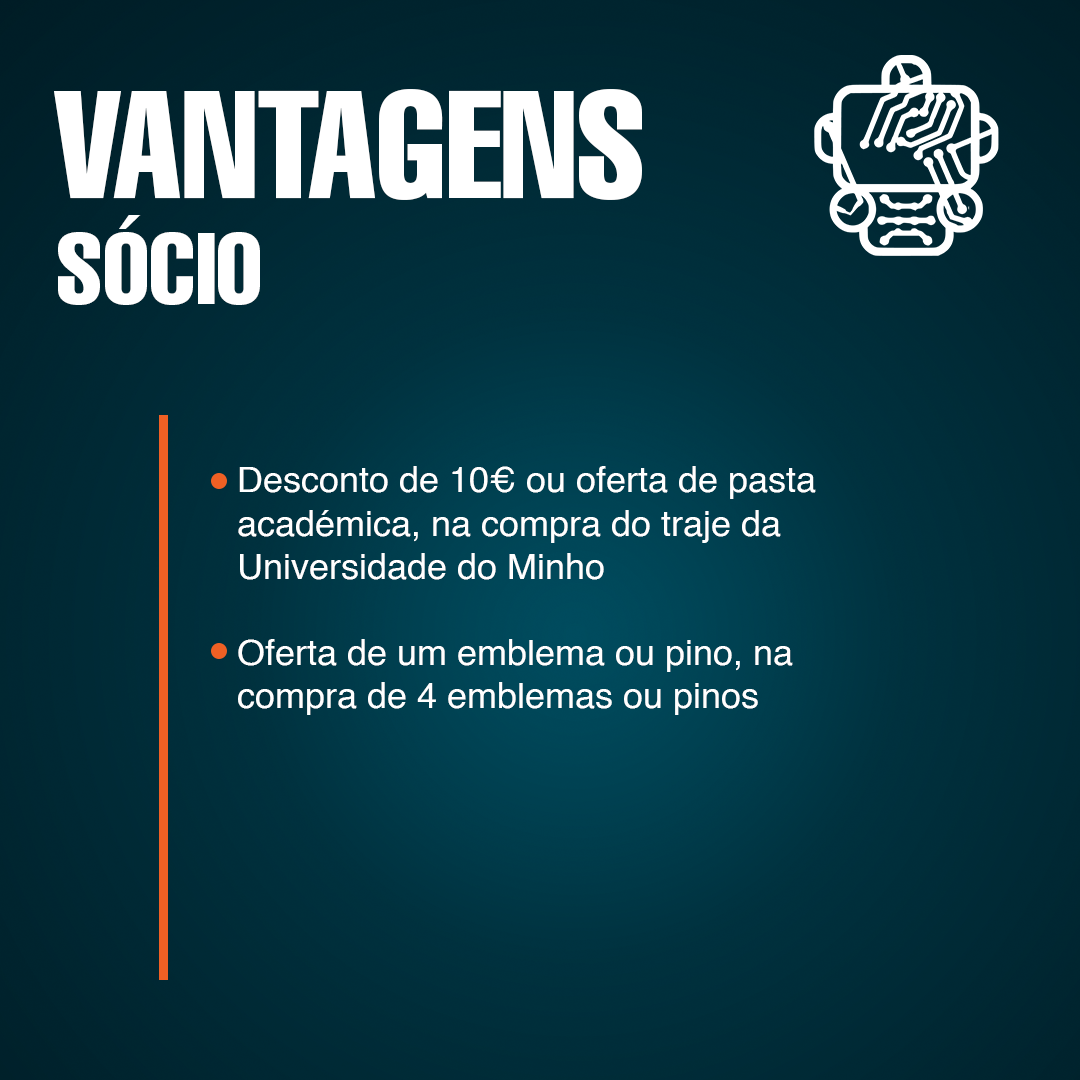
<style>
.page{position:relative;width:1080px;height:1080px}
.page>*{position:absolute;margin:0}
.t1{font:150px "Helvetica-Compressed";color:#ffffff}
.t2{font:100px "Helvetica-Compressed";color:#ffffff}
.t3{font:36px "Helvetica";color:#ffffff}
</style>
<div class="page">
<p class="t1" style="left:54px;top:89px;width:588px;height:111px">VANTAGENS</p>
<p class="t2" style="left:58px;top:215px;width:202px;height:90px">SÓCIO</p>
<p class="t3" style="left:238px;top:466px;width:578px;height:249px">Desconto de 10€ ou oferta de pasta académica, na compra do traje da Universidade do Minho<br><br>Oferta de um emblema ou pino, na compra de 4 emblemas ou pinos</p>
</div>
